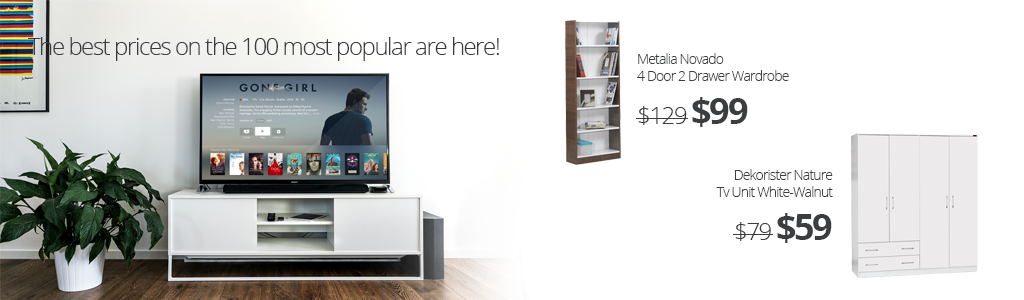
<style>
.page{position:relative;width:1024px;height:300px;background:#ffffff}
.page>*{position:absolute;margin:0}
.t1{font:24px "OpenSans-Light";letter-spacing:-0.06em;color:#3b3d3f}
.t2{font:14px "OpenSans-Light";letter-spacing:-0.06em;color:#3b3d3f}
.t3{font:36px "OpenSans-Bold";letter-spacing:-0.06em;color:#3b3d3f}
</style>
<div class="page">
<p class="t1" style="left:28px;top:37px;width:471px;height:24px">The best prices on the 100 most popular are here!</p>
<p class="t2" style="left:637px;top:53px;width:152px;height:74px">Metalia Novado<br>4 Door 2 Drawer Wardrobe<br><span class="t1">$129 </span><span class="t3">$99</span></p>
<p class="t2" style="left:716px;top:169px;width:117px;height:74px;text-align:right">Dekorister Nature<br>Tv Unit White-Walnut<br><span class="t1">$79 </span><span class="t3">$59</span></p>
</div>
